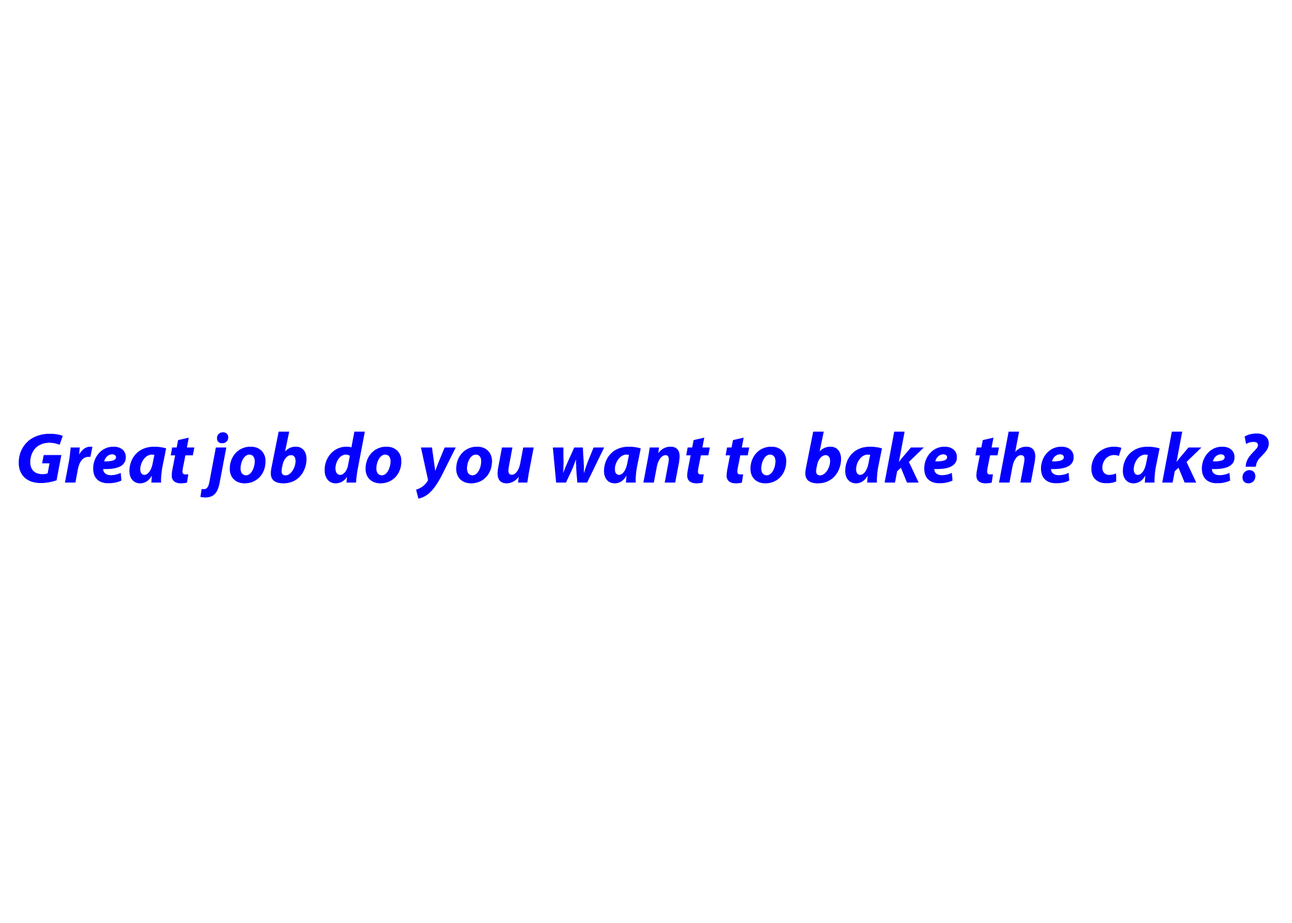
<style>
.page{position:relative;width:1292px;height:923px;background:#ffffff}
.page>*{position:absolute;margin:0}
.t1{font:71.4px "MyriadPro-BoldIt";letter-spacing:0.01em;color:#0600fe}
</style>
<div class="page">
<p class="t1" style="left:18px;top:431px;width:1251px;height:68px">Great job do you want to bake the cake?</p>
</div>
